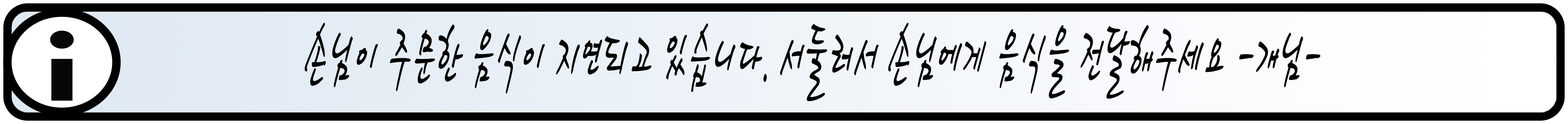
<style>
.page{position:relative;width:1568px;height:124px}
.page>*{position:absolute;margin:0}
.t1{font:80.4px "HaanCjaB";color:#000000;scale:0.47 1}
</style>
<div class="page">
<p class="t1" style="left:304px;top:23px;width:1017px;height:78px">손님이 주문한 음식이 지연되고 있습니다. 서둘러서 손님에게 음식을 전달해주세요 -개님-</p>
</div>
